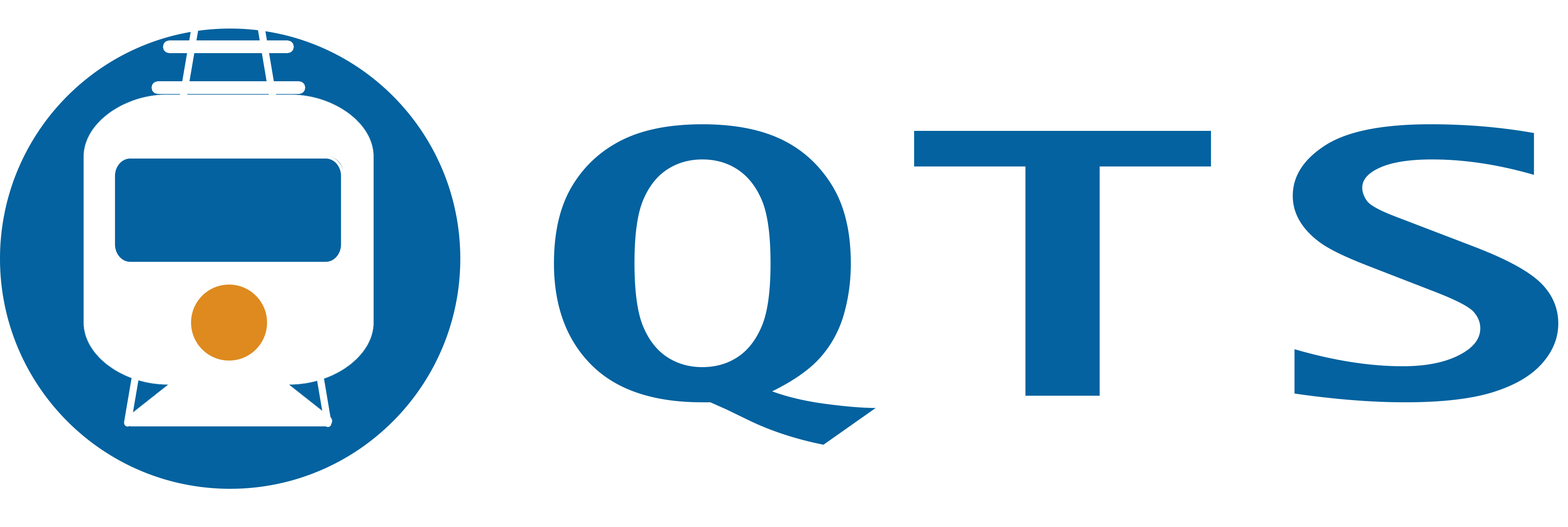
<style>
.page{position:relative;width:1568px;height:527px;background:#ffffff}
.page>*{position:absolute;margin:0}
.t1{font:366.9px "LucidaSans-TypewriterBold";letter-spacing:0.1em;color:#134eab;scale:1.4 1}
</style>
<div class="page">
<p class="t1" style="left:554px;top:124px;width:1004px;height:321px">QTS</p>
</div>
